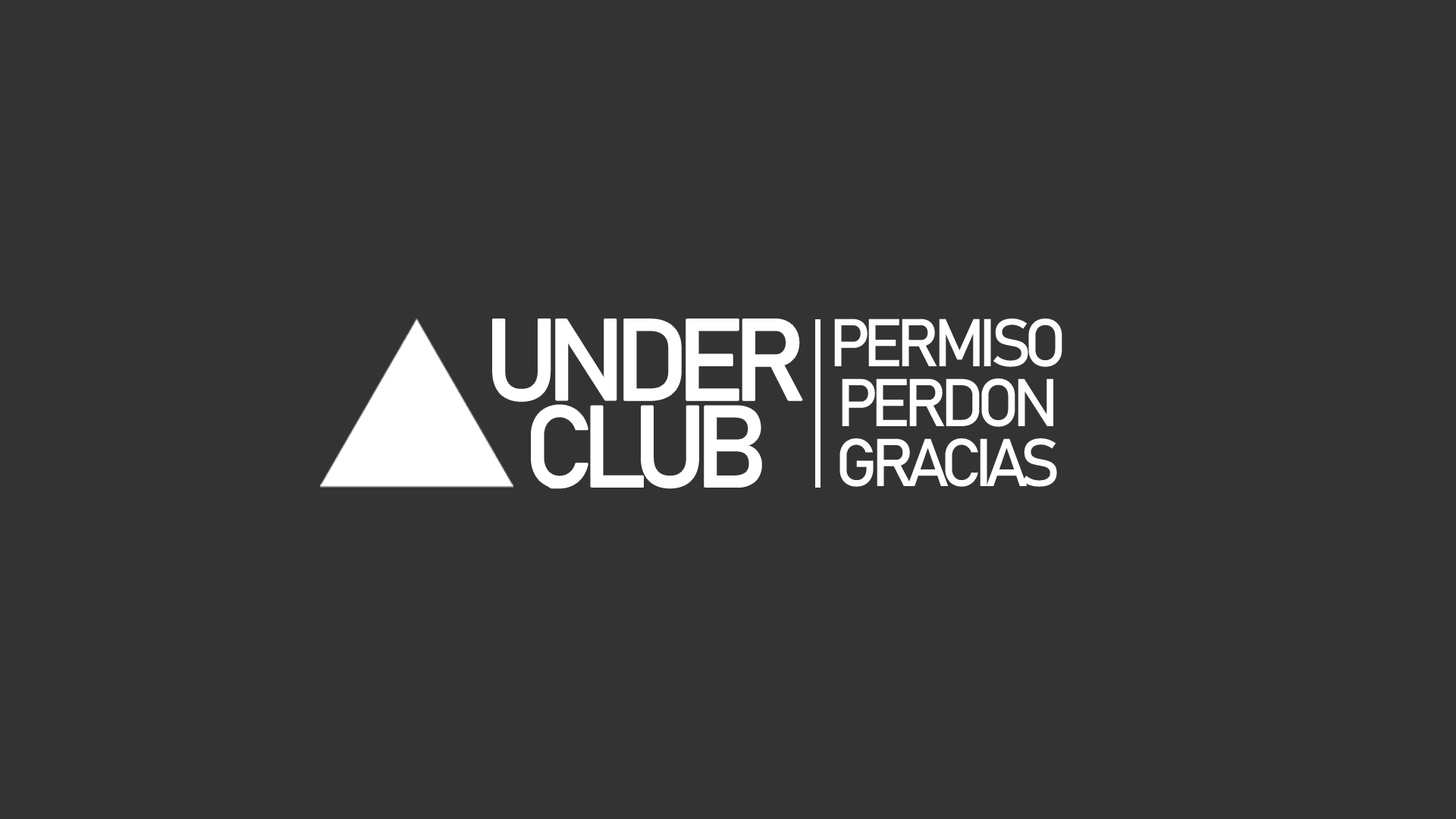
<style>
.page{position:relative;width:1456px;height:819px;background:#333333}
.page>*{position:absolute;margin:0}
.t1{font:113.6px/86.8px "Bahnschrift";letter-spacing:-0.1em;color:#ffffff}
.t2{font:66.6px/60px "Bahnschrift";letter-spacing:-0.1em;color:#fffefe}
</style>
<div class="page">
<p class="t1" style="left:493px;top:319px;width:309px;height:169px;text-align:center">UNDER<br>CLUB</p>
<p class="t2" style="left:834px;top:318px;width:228px;height:169px;text-align:center">PERMISO<br>PERDON<br>GRACIAS</p>
</div>
